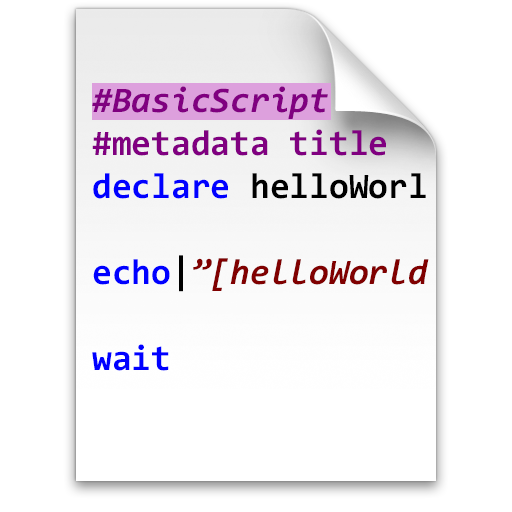
<style>
.page{position:relative;width:512px;height:512px;background:#ffffff}
.page>*{position:absolute;margin:0}
.t1{font:35.9px "Consolas-Bold";color:#800080}
.t2{font:35.9px "Consolas-BoldItalic";color:#800080}
.t3{font:35.9px "Consolas-Bold";color:#0000ff}
.t4{font:35.9px "Consolas-Bold";color:#000000}
.t5{font:35.9px "Consolas-BoldItalic";color:#800000}
</style>
<div class="page">
<p class="t1" style="left:92px;top:86px;width:337px;height:285px"><span class="t2">#BasicScript<br></span>#metadata title<br><span class="t3">declare </span><span class="t4">helloWorl<br><br></span><span class="t3">echo</span><span class="t4">|</span><span class="t5">”[helloWorld<br><br></span><span class="t3">wait</span></p>
</div>
